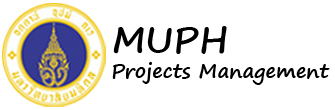
<style>
.page{position:relative;width:335px;height:110px;background:#ffffff}
.page>*{position:absolute;margin:0}
.t1{font:36px "SegoePrint-Bold";color:#000000}
.t2{font:20px "SegoePrint-Bold";color:#000000}
</style>
<div class="page">
<p class="t1" style="left:113px;top:26px;width:114px;height:28px">MUPH</p>
<p class="t2" style="left:112px;top:62px;width:218px;height:23px">Projects Management</p>
</div>
